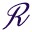
<style>
.page{position:relative;width:32px;height:32px;background:#ffffff}
.page>*{position:absolute;margin:0}
.t1{font:20px "ConeriaScriptSlantedDemo";color:#280755;font-weight:bold}
</style>
<div class="page">
<p class="t1" style="left:2px;top:2px;width:28px;height:28px;rotate:-15deg">R</p>
</div>
